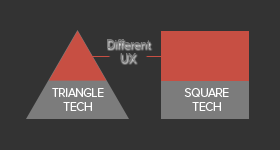
<style>
.page{position:relative;width:280px;height:150px;background:#333333}
.page>*{position:absolute;margin:0}
.t1{font:12.4px/14px "ProximaNova-Regular";letter-spacing:-0.02em;color:#7c7c7c}
.t2{font:12.4px/14px "ProximaNova-Light";letter-spacing:-0.02em;color:#ffffff}
</style>
<div class="page">
<p class="t1" style="left:107px;top:39px;width:44px;height:23px;text-align:center">Different<br>UX</p>
<p class="t2" style="left:52px;top:88px;width:52px;height:23px;text-align:center">TRIANGLE<br>TECH</p>
<p class="t2" style="left:184px;top:88px;width:45px;height:23px;text-align:center">SQUARE<br>TECH</p>
</div>
